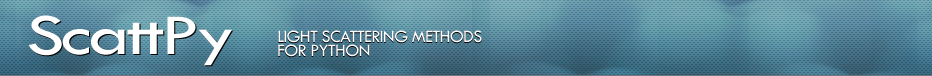
<style>
.page{position:relative;width:932px;height:76px}
.page>*{position:absolute;margin:0}
.t1{font:60px "TwCenMT-Regular";letter-spacing:-0.05em;color:#fefffe;scale:1.3 1}
.t2{font:18px/14px "TwCenMT-Regular";letter-spacing:-0.036em;color:#fefffe}
.t3{font:18px/14px "TwCenMT-Regular";letter-spacing:-0.036em}
</style>
<div class="page">
<p class="t1" style="left:28px;top:15px;width:204px;height:51px">ScattPy</p>
<p class="t1" style="left:29px;top:16px;width:204px;height:51px">ScattPy</p>
<p class="t2" style="left:278px;top:30px;width:204px;height:27px">LIGHT SCATTERING METHODS<br>FOR PYTHON</p>
<p class="t3" style="left:278px;top:31px;width:204px;height:27px">LIGHT SCATTERING METHODS<br>FOR PYTHON</p>
</div>
